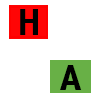
<style>
.page{position:relative;width:100px;height:100px;background:#ffffff}
.page>*{position:absolute;margin:0}
.t1{font:35.9px "Roboto-Black";color:#000000;scale:0.82 1}
.t2{font:34.9px "Roboto-Black";color:#000000;scale:0.88 1}
</style>
<div class="page">
<p class="t1" style="left:20px;top:9px;width:18px;height:26px">H</p>
<p class="t2" style="left:60px;top:65px;width:22px;height:25px">A</p>
</div>
